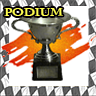
<style>
.page{position:relative;width:96px;height:96px;background:#ffffff}
.page>*{position:absolute;margin:0}
.t1{font:13px "AppleGaramond";color:#fefc4f;scale:1.43 1}
</style>
<div class="page">
<p class="t1" style="left:4px;top:8px;width:59px;height:8px">PODIUM</p>
</div>
